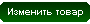
<style>
.page{position:relative;width:90px;height:24px;background:#ffffff}
.page>*{position:absolute;margin:0}
.t1{font:10px "Arial-BoldMT";color:#ffffff}
</style>
<div class="page">
<p class="t1" style="left:8px;top:8px;width:75px;height:9px">Изменить товар</p>
</div>
